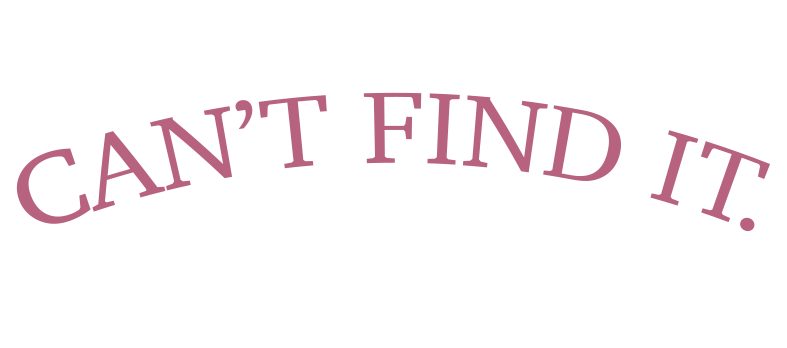
<style>
.page{position:relative;width:787px;height:348px;background:#ffffff}
.page>*{position:absolute;margin:0}
.t1{font:104.2px "Charter-Roman";color:#b7637f}
</style>
<div class="page">
<p class="t1" style="left:16px;top:92px;width:755px;height:140px">CAN’T FIND IT.<br>.</p>
</div>
